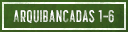
<style>
.page{position:relative;width:128px;height:32px}
.page>*{position:absolute;margin:0}
.t1{font:12px "HillstownCondensedClean";letter-spacing:0.05em;text-transform:uppercase}
</style>
<div class="page">
<p class="t1" style="left:13px;top:10px;width:101px;height:13px">arquibancadas 1-6</p>
</div>
